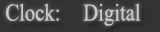
<style>
.page{position:relative;width:160px;height:32px;background:#333333}
.page>*{position:absolute;margin:0}
.t1{font:24px "TimesNewRomanPSMT";color:#cdcbc9;scale:0.86 1}
</style>
<div class="page">
<p class="t1" style="left:6px;top:3px;width:53px;height:18px">Clock:</p>
<p class="t1" style="left:83px;top:3px;width:58px;height:23px">Digital</p>
</div>
